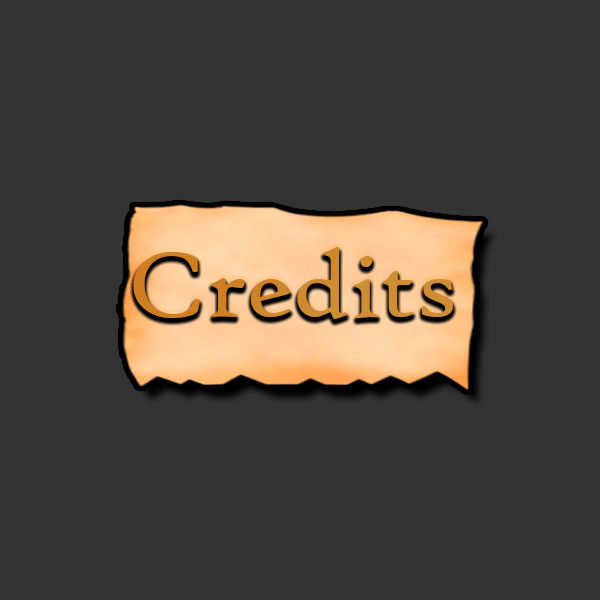
<style>
.page{position:relative;width:600px;height:600px;background:#333333}
.page>*{position:absolute;margin:0}
.t1{font:100.2px "HighTowerText-Reg";color:#cf892e;scale:1.06 1}
</style>
<div class="page">
<p class="t1" style="left:133px;top:247px;width:320px;height:72px">Credits</p>
</div>
